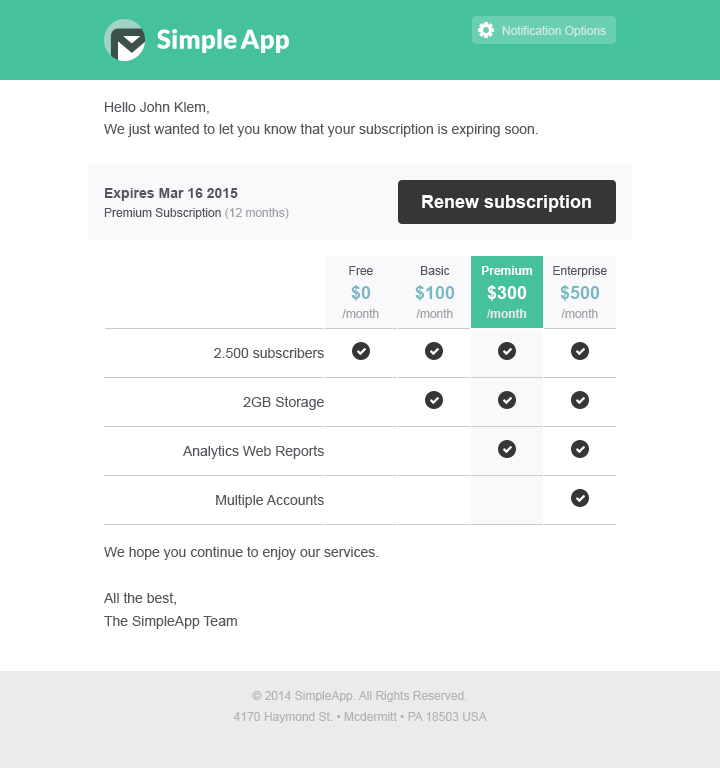
<style>
.page{position:relative;width:720px;height:768px;background:#ffffff}
.page>*{position:absolute;margin:0}
.t1{font:12px "ArialMT";color:#ccece2}
.t2{font:14px/22px "ArialMT";color:#54565c}
.t3{font:12px/19px "ArialMT";color:#54565c}
.t4{font:14px/19px "Arial-BoldMT";color:#54565c}
.t5{font:12px/19px "ArialMT";color:#a1a2a5}
.t6{font:18px "Arial-BoldMT";color:#ffffff}
.t7{font:12px/24px "ArialMT";color:#54565c}
.t8{font:18px/24px "Arial-BoldMT";color:#78b8c4}
.t9{font:12px/24px "Arial-BoldMT";color:#ffffff}
.t10{font:18px/24px "Arial-BoldMT";color:#ffffff}
.t11{font:12px/19px "Arial-BoldMT";color:#e6e6e6}
.t12{font:14px/49px "ArialMT";color:#54565c}
.t13{font:12px/21px "ArialMT";color:#b3b3b3}
</style>
<div class="page">
<p class="t1" style="left:502px;top:26px;width:104px;height:11px">Notification Options</p>
<p class="t2" style="left:104px;top:102px;width:434px;height:35px">Hello John Klem,<br>We just wanted to let you know that your subscription is expiring soon.</p>
<p class="t3" style="left:104px;top:188px;width:185px;height:31px"><span class="t4">Expires Mar 16 2015<br></span>Premium Subscription <span class="t5">(12 months)</span></p>
<p class="t6" style="left:422px;top:195px;width:169px;height:17px">Renew subscription</p>
<p class="t5" style="left:342px;top:266px;width:37px;height:52px;text-align:center"><span class="t7">Free<br></span><span class="t8">$0<br></span>/month</p>
<p class="t5" style="left:415px;top:266px;width:40px;height:52px;text-align:center"><span class="t7">Basic<br></span><span class="t8">$100<br></span>/month</p>
<p class="t9" style="left:482px;top:266px;width:50px;height:52px;text-align:center">Premium<br><span class="t10">$300<br></span><span class="t11">/month</span></p>
<p class="t7" style="left:553px;top:266px;width:54px;height:52px;text-align:center">Enterprise<br><span class="t8">$500<br></span><span class="t5">/month</span></p>
<p class="t12" style="left:183px;top:348px;width:141px;height:160px;text-align:right">2.500 subscribers<br>2GB Storage<br>Analytics Web Reports<br>Multiple Accounts</p>
<p class="t2" style="left:104px;top:546px;width:274px;height:83px">We hope you continue to enjoy our services.<br><br>All the best,<br>The SimpleApp Team</p>
<p class="t13" style="left:233px;top:691px;width:254px;height:32px;text-align:center">© 2014 SimpleApp. All Rights Reserved.<br>4170 Haymond St. • Mcdermitt • PA 18503 USA</p>
</div>
